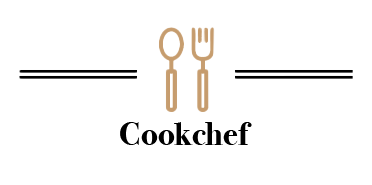
<style>
.page{position:relative;width:372px;height:185px;background:#ffffff}
.page>*{position:absolute;margin:0}
.t1{font:33.3px "BodoniSvtyTwoITCTT-Bold";color:#000000}
</style>
<div class="page">
<p class="t1" style="left:120px;top:122px;width:132px;height:23px">Cookchef</p>
</div>
